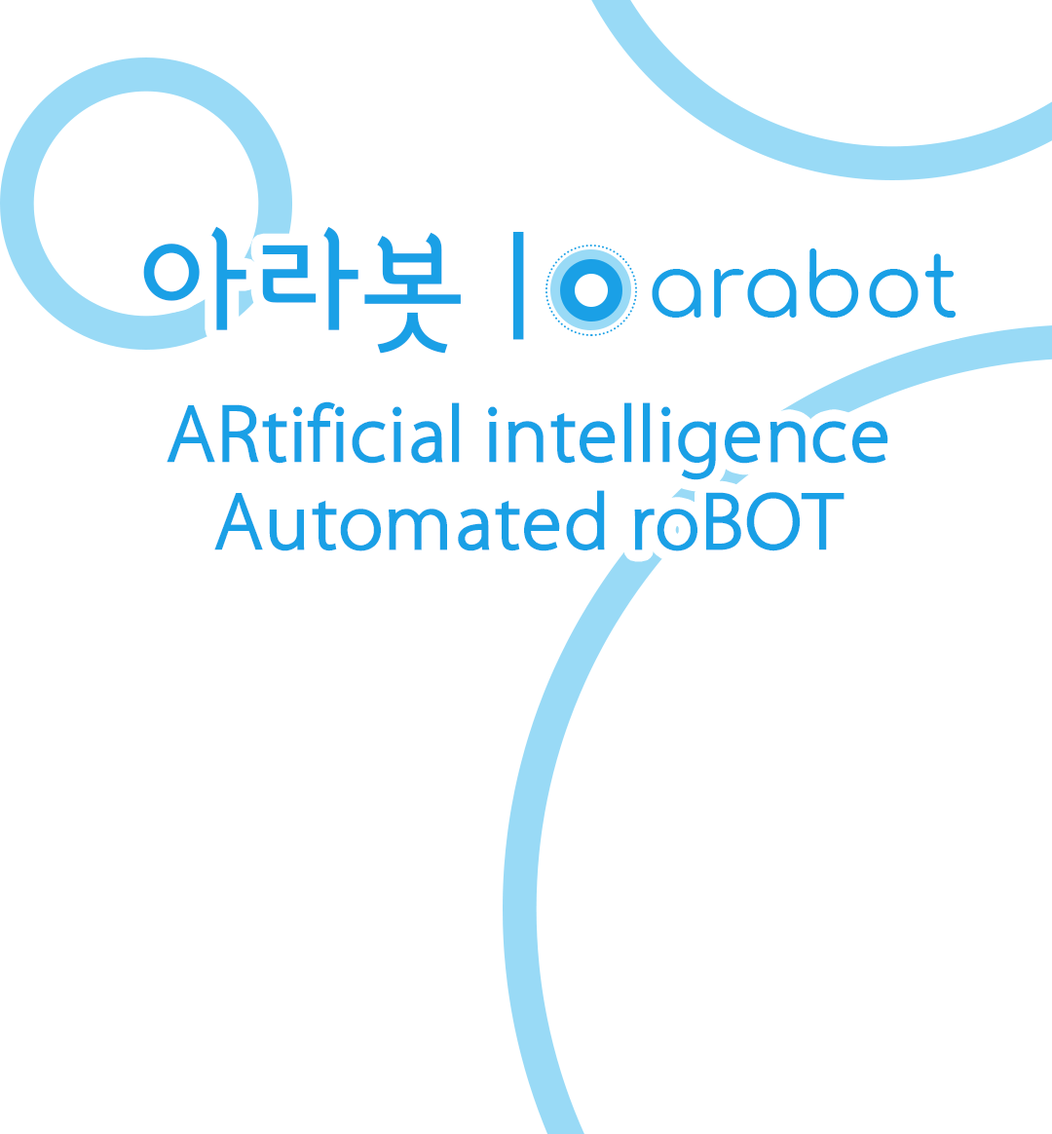
<style>
.page{position:relative;width:1052px;height:1134px;background:#ffffff}
.page>*{position:absolute;margin:0}
.t1{font:131.5px "SangSangBodyOTFM";color:#ffffff}
.t2{font:131.5px "SangSangTitleOTFM";color:#1aa0e6}
.t3{font:80.3px/87.7px "SangSangBodyOTFM";color:#1aa0e6}
</style>
<div class="page">
<p class="t1" style="left:143px;top:226px;width:815px;height:128px"><span class="t2">아라봇 | </span>Arabot</p>
<p class="t3" style="left:167px;top:401px;width:721px;height:150px;text-align:center">ARtificiａl intelligence<br>Automated roBOT</p>
</div>
